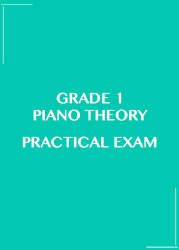
<style>
.page{position:relative;width:179px;height:250px;background:#01c8b1}
.page>*{position:absolute;margin:0}
.t1{font:14.7px "LaoMN";color:#ffffff;text-transform:uppercase;font-weight:bold}
</style>
<div class="page">
<p class="t1" style="left:33px;top:92px;width:115px;height:29px;text-align:center">Grade 1<br>PIANO Theory</p>
<p class="t1" style="left:22px;top:136px;width:135px;height:12px">Practical Exam</p>
</div>
